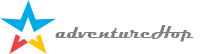
<style>
.page{position:relative;width:203px;height:54px;background:#ffffff}
.page>*{position:absolute;margin:0}
.t1{font:18px "Magneto-Bold";color:#7f7e82}
</style>
<div class="page">
<p class="t1" style="left:55px;top:25px;width:139px;height:17px">adventureHop</p>
</div>
